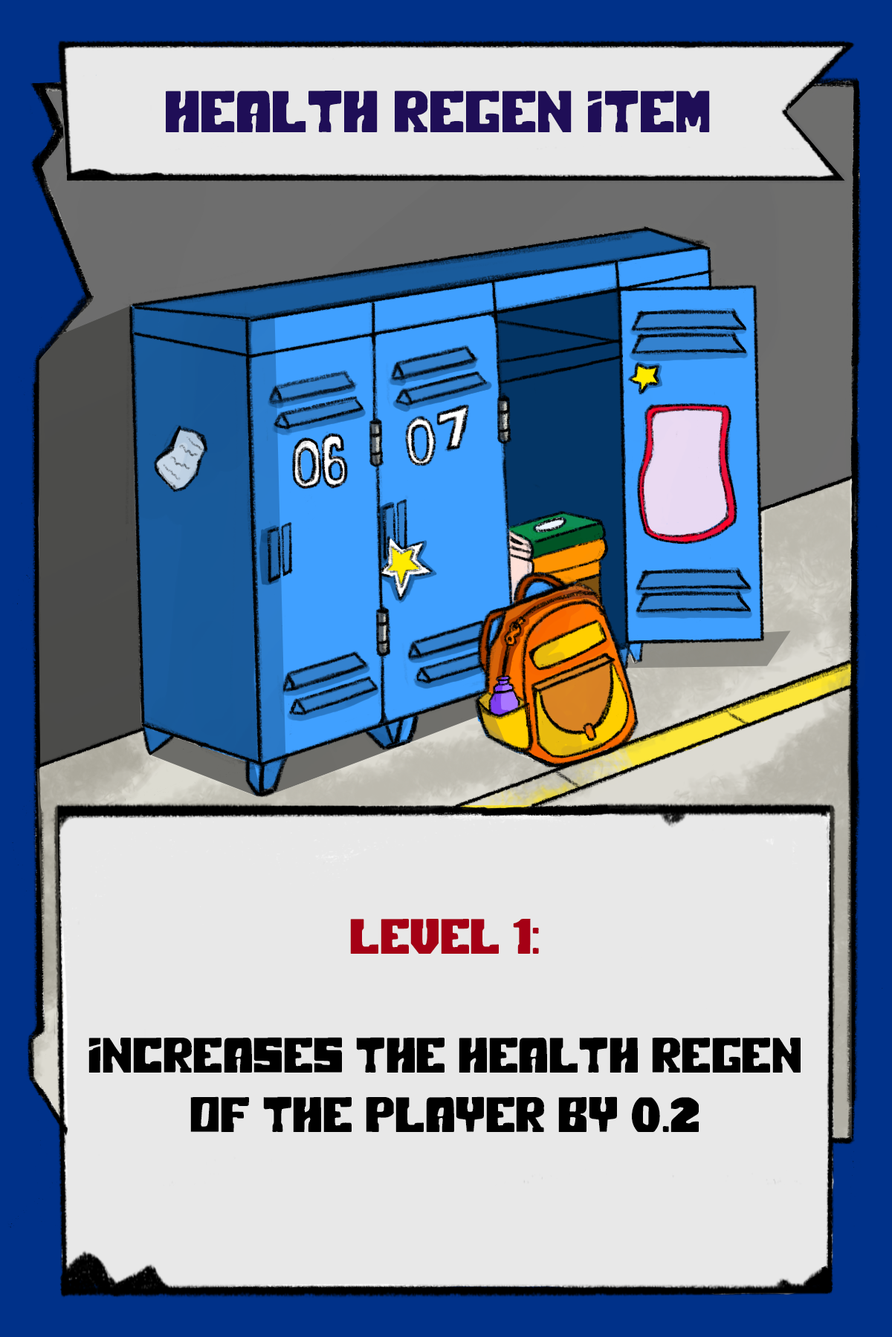
<style>
.page{position:relative;width:892px;height:1337px;background:#e8e8e8}
.page>*{position:absolute;margin:0}
.t1{font:58.8px "PolarPress";color:#1f0e57}
.t2{font:49.5px "PolarPress";color:#000000}
.t3{font:49.5px "PolarPress";color:#a50015}
</style>
<div class="page">
<p class="t1" style="left:166px;top:91px;width:544px;height:41px">Health regen item</p>
<p class="t2" style="left:88px;top:919px;width:712px;height:213px;text-align:center"><span class="t3">LEVEL 1:<br></span><br>Increases the health regen of the player by 0.2</p>
</div>
